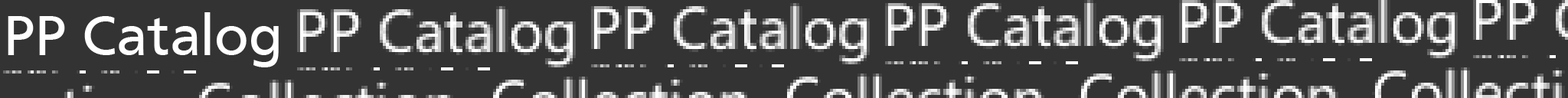
<style>
.page{position:relative;width:1568px;height:98px;background:#333333}
.page>*{position:absolute;margin:0}
.t1{font:59.2px "Frutiger";color:#ffffff}
</style>
<div class="page">
<p class="t1" style="left:8px;top:12px;width:271px;height:55px">PP Catalog</p>
</div>
